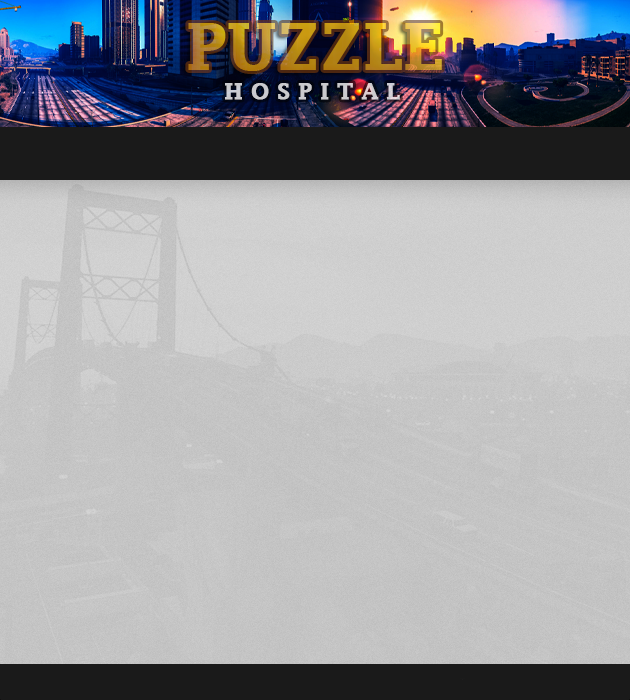
<style>
.page{position:relative;width:630px;height:700px}
.page>*{position:absolute;margin:0}
.t1{font:63.4px "LucidaFax-Demi";font-weight:bold}
.t2{font:21.9px "LucidaFax-Demi";color:#cacbce;font-weight:bold}
</style>
<div class="page">
<p class="t1" style="left:188px;top:23px;width:254px;height:48px">PUZZLE</p>
<p class="t2" style="left:225px;top:83px;width:175px;height:17px">H O S P I T A L</p>
</div>
